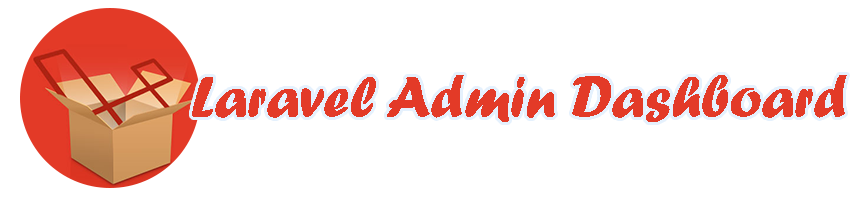
<style>
.page{position:relative;width:854px;height:200px;background:#ffffff}
.page>*{position:absolute;margin:0}
.t1{font:60px "ForteMT";color:#e33a27}
</style>
<div class="page">
<p class="t1" style="left:192px;top:75px;width:655px;height:47px">Laravel Admin Dashboard</p>
</div>
